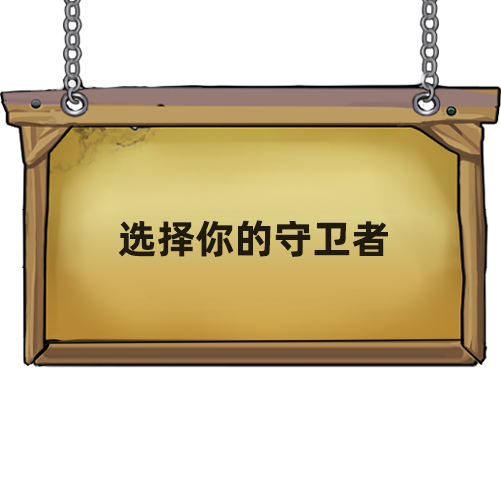
<style>
.page{position:relative;width:501px;height:477px;background:#ffffff}
.page>*{position:absolute;margin:0}
.t1{font:39.5px "AlibabaPuHuiTiB";color:#20190e}
</style>
<div class="page">
<p class="t1" style="left:118px;top:220px;width:270px;height:37px">选择你的守卫者</p>
</div>
